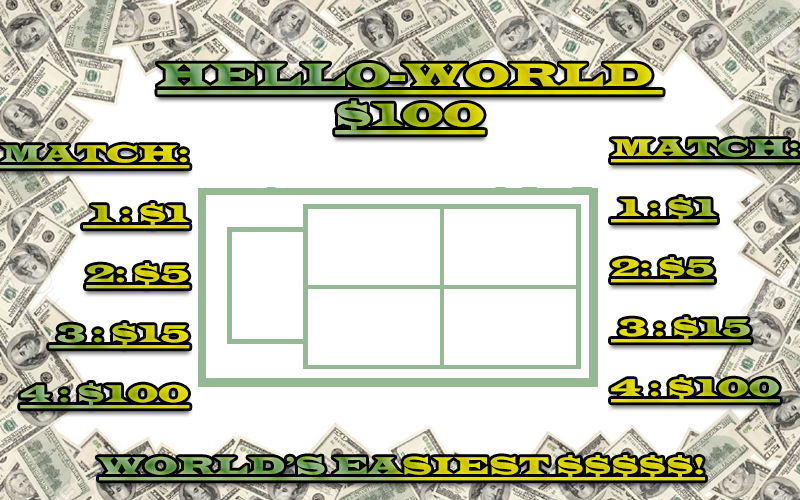
<style>
.page{position:relative;width:800px;height:500px;background:#ffffff}
.page>*{position:absolute;margin:0}
.t1{font:33.3px "LatinWide";text-transform:uppercase;text-decoration:underline}
.t2{font:25px "LatinWide";text-transform:uppercase;text-decoration:underline}
</style>
<div class="page">
<p class="t1" style="left:157px;top:63px;width:506px;height:72px;text-align:center">Hello-World <br>$100</p>
<p class="t2" style="left:0px;top:144px;width:190px;height:265px;text-align:right">Match:<br><br> 1 : $1<br><br>2: $5<br><br> 3 : $15<br><br>4 : $100</p>
<p class="t2" style="left:611px;top:138px;width:189px;height:265px">Match:<br><br> 1 : $1<br><br>2: $5<br><br> 3 : $15<br><br>4 : $100</p>
<p class="t2" style="left:97px;top:455px;width:608px;height:26px">WOrld’s easiest $$$$$!</p>
</div>
